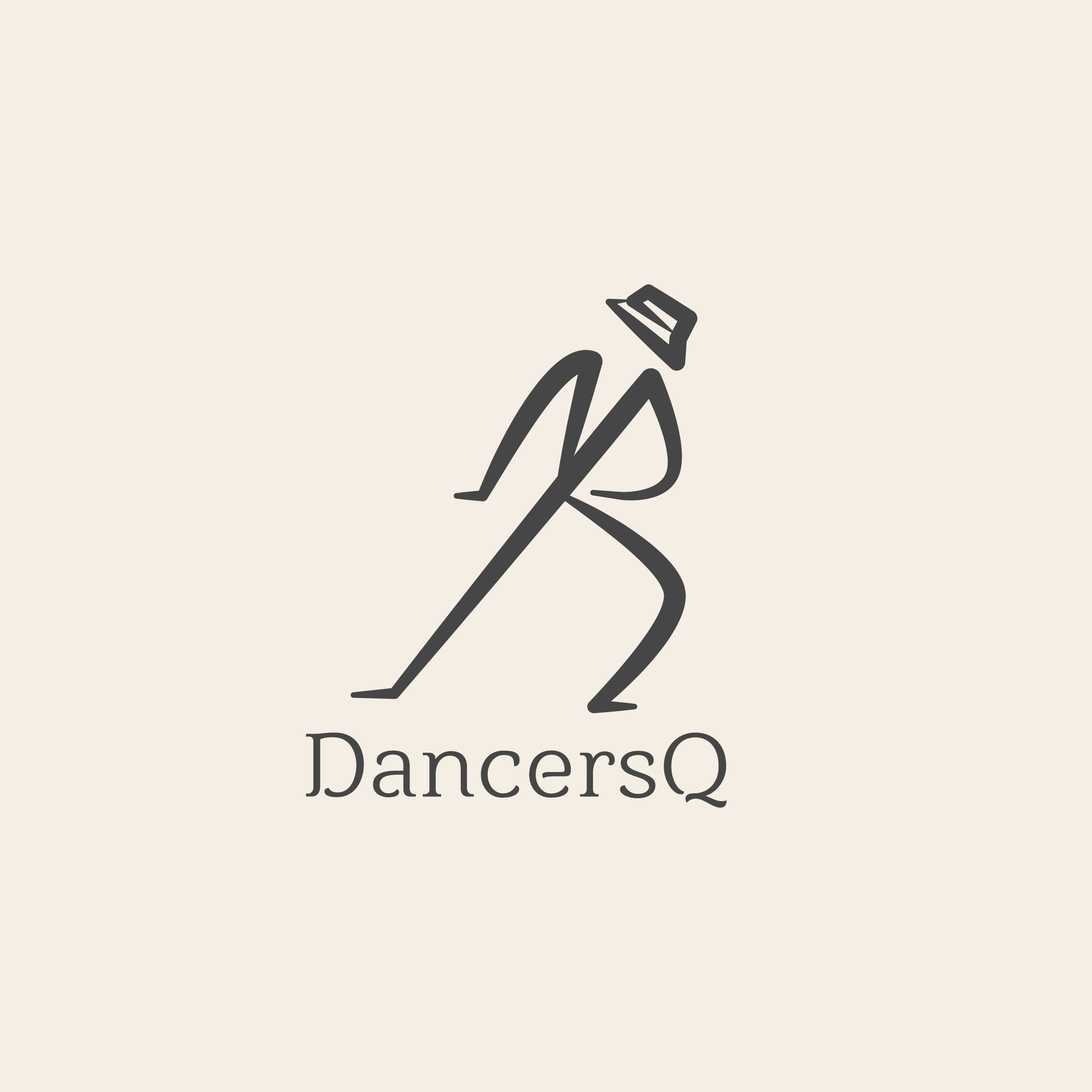
<style>
.page{position:relative;width:1092px;height:1092px;background:#f5eee5}
.page>*{position:absolute;margin:0}
.t1{font:92.5px "Barkentina";color:#464646;font-weight:bold}
</style>
<div class="page">
<p class="t1" style="left:306px;top:732px;width:421px;height:76px">DancersQ</p>
</div>
